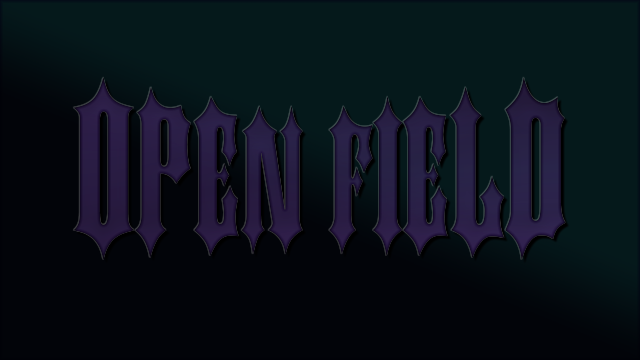
<style>
.page{position:relative;width:640px;height:360px;background:#020409}
.page>*{position:absolute;margin:0}
.t1{font:147.8px "Ironwood";color:#281d42}
.t2{font:181.9px "Ironwood";color:#281d42}
.t3{font:170.5px "Ironwood";color:#281d42}
.t4{font:159.1px "Ironwood";color:#281d42}
</style>
<div class="page">
<p class="t1" style="left:73px;top:77px;width:493px;height:183px"><span class="t2">O</span><span class="t3">p</span><span class="t4">e</span>n F<span class="t4">ie</span><span class="t3">l</span><span class="t2">d</span></p>
</div>
